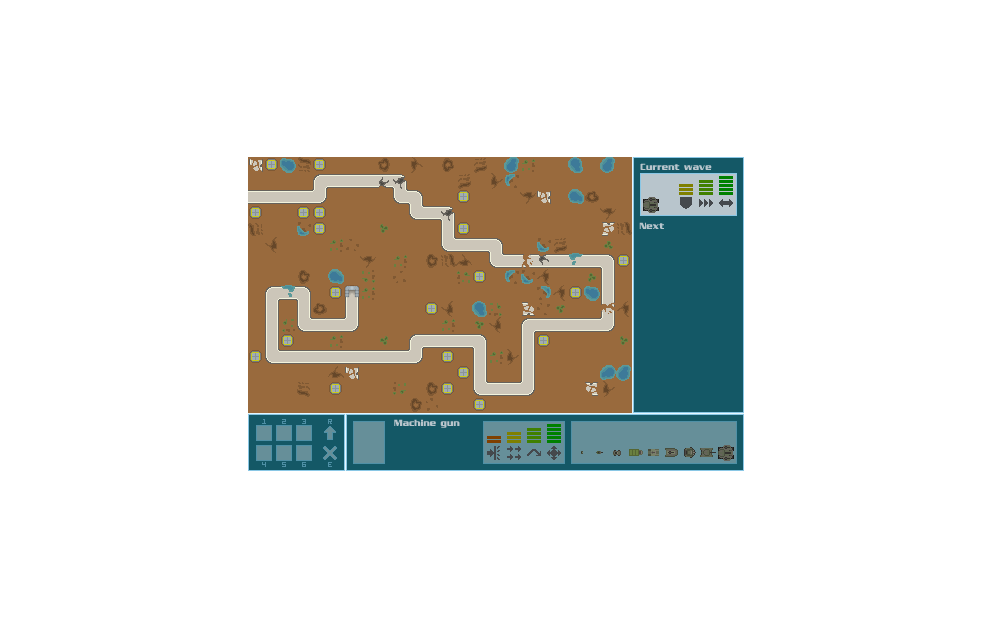
<style>
.page{position:relative;width:992px;height:628px;background:#ffffff}
.page>*{position:absolute;margin:0}
.t1{font:9px "EnterSansmanBold";color:#b8c5cc}
</style>
<div class="page">
<p class="t1" style="left:640px;top:163px;width:72px;height:7px">Current wave</p>
<p class="t1" style="left:639px;top:222px;width:25px;height:7px">Next</p>
<p class="t1" style="left:394px;top:419px;width:66px;height:9px">Machine gun</p>
</div>
